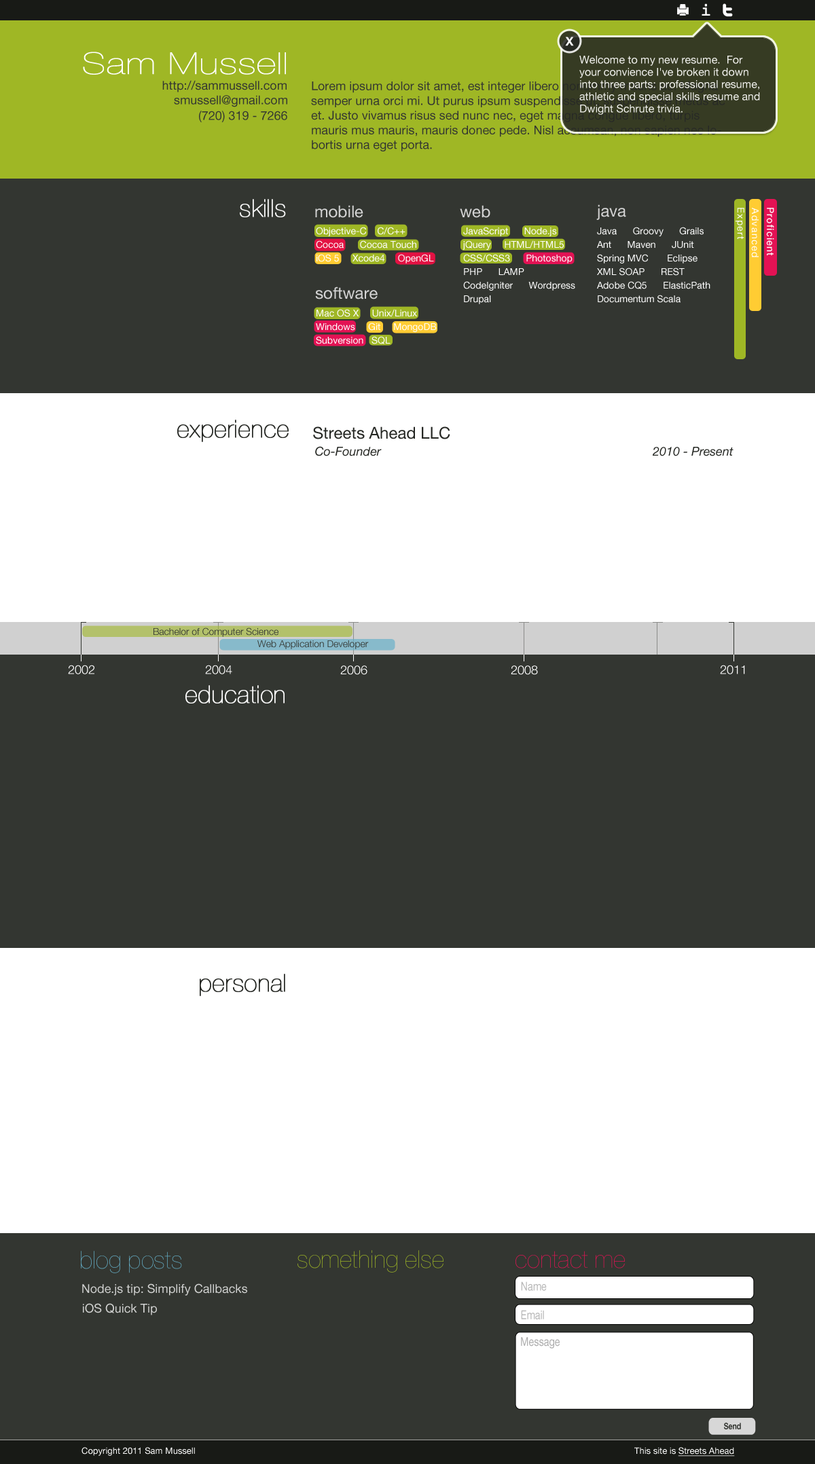
<style>
.page{position:relative;width:815px;height:1464px;background:#333631}
.page>*{position:absolute;margin:0}
.t1{font:17px "Courier";color:#ffffff;font-weight:bold}
.t2{font:12.2px "HelveticaNeue-Bold";color:#ffffff}
.t3{font:29.9px "HelveticaNeue-UltraLight";color:#ffffff;font-weight:bold;scale:1.28 1}
.t4{font:10.9px/12.2px "HelveticaNeue";color:#f3f3f0}
.t5{font:12.2px "HelveticaNeue";color:#333631}
.t6{font:24.4px "HelveticaNeue-UltraLight";color:#ffffff;font-weight:bold}
.t7{font:16.3px "HelveticaNeue";color:#d4d4d4}
.t8{font:9.5px "HelveticaNeue";letter-spacing:0.1em;color:#ffffff}
.t9{font:9.5px/13.6px "HelveticaNeue";color:#ffffff}
.t10{font:24.4px "HelveticaNeue-UltraLight";color:#252723;font-weight:bold}
.t11{font:16.3px "HelveticaNeue";color:#252723}
.t12{font:12.2px "HelveticaNeue-Italic";color:#252723}
.t13{font:9.5px "HelveticaNeue-Light";color:#333631}
.t14{font:12.2px "HelveticaNeue-Light";color:#ffffff}
.t15{font:24.4px "HelveticaNeue-UltraLight";color:#65b0c8}
.t16{font:24.4px "HelveticaNeue-UltraLight";color:#9fb725}
.t17{font:24.4px "HelveticaNeue-UltraLight";color:#e31254}
.t18{font:12.2px "HelveticaNeue";color:#d2d3d2}
.t19{font:12.2px "HelveticaNeue";color:#b7b7b7;scale:0.8 1}
.t20{font:12.2px "HelveticaNeue";color:#acacac;scale:0.8 1}
.t21{font:8.9px "HelveticaNeue-Bold";color:#333631;scale:0.8 1}
.t22{font:8.8px "HelveticaNeue";color:#ffffff}
.t23{font:8.8px "HelveticaNeue";color:#ffffff;text-decoration:underline}
</style>
<div class="page">
<p class="t1" style="left:701px;top:3px;width:9px;height:13px">i</p>
<p class="t2" style="left:565px;top:37px;width:9px;height:9px">X</p>
<p class="t3" style="left:83px;top:52px;width:203px;height:23px">Sam Mussell</p>
<p class="t4" style="left:579px;top:56px;width:181px;height:59px">Welcome to my new resume.  For your convience I've broken it down into three parts: professional resume, athletic and special skills resume and Dwight Schrute trivia.</p>
<p class="t5" style="left:162px;top:80px;width:124px;height:12px">http://sammussell.com</p>
<p class="t5" style="left:311px;top:81px;width:414px;height:70px">Lorem ipsum dolor sit amet, est integer libero nonummy mauris ac. Magna semper urna orci mi. Ut purus ipsum suspendisse ut, suspendisse metus ac et. Justo vivamus risus sed nunc nec, eget magna congue libero, turpis mauris mus mauris, mauris donec pede. Nisl accumsan, non sapien nec lobortis urna eget porta.</p>
<p class="t5" style="left:174px;top:95px;width:113px;height:12px">smussell@gmail.com</p>
<p class="t5" style="left:199px;top:111px;width:88px;height:11px">(720) 319 - 7266</p>
<p class="t6" style="left:240px;top:199px;width:46px;height:18px">skills</p>
<p class="t7" style="left:315px;top:205px;width:48px;height:13px">mobile</p>
<p class="t7" style="left:460px;top:205px;width:30px;height:13px">web</p>
<p class="t7" style="left:596px;top:204px;width:30px;height:16px">java</p>
<p class="t8" style="left:735px;top:208px;width:9px;height:31px;rotate:90deg">Expert</p>
<p class="t8" style="left:751px;top:208px;width:7px;height:49px;rotate:90deg">Advanced</p>
<p class="t8" style="left:766px;top:208px;width:8px;height:48px;rotate:90deg">Proficient</p>
<p class="t9" style="left:316px;top:227px;width:118px;height:36px">Objective-C    C/C++    Cocoa      Cocoa Touch    iOS 5     Xcode4     OpenGL</p>
<p class="t9" style="left:462px;top:227px;width:113px;height:77px">JavaScript      Node.js      jQuery     HTML/HTML5 CSS/CSS3      Photoshop<br>PHP      LAMP     <br>CodeIgniter      Wordpress      Drupal</p>
<p class="t9" style="left:597px;top:227px;width:113px;height:76px">Java      Groovy      Grails<br>Ant      Maven      JUnit <br>Spring MVC       Eclipse      XML SOAP      REST      <br>Adobe CQ5      ElasticPath      Documentum Scala</p>
<p class="t7" style="left:315px;top:286px;width:62px;height:13px">software</p>
<p class="t9" style="left:316px;top:309px;width:121px;height:35px">Mac OS X     Unix/Linux <br>Windows     Git     MongoDB<br>Subversion   SQL</p>
<p class="t10" style="left:177px;top:420px;width:112px;height:22px">experience</p>
<p class="t11" style="left:313px;top:426px;width:137px;height:13px">Streets Ahead LLC</p>
<p class="t12" style="left:315px;top:446px;width:67px;height:10px">Co-Founder</p>
<p class="t12" style="left:652px;top:447px;width:81px;height:9px">2010 - Present</p>
<p class="t13" style="left:153px;top:627px;width:125px;height:10px">Bachelor of Computer Science</p>
<p class="t13" style="left:257px;top:640px;width:112px;height:9px">Web Application Developer</p>
<p class="t14" style="left:68px;top:665px;width:26px;height:9px">2002</p>
<p class="t14" style="left:205px;top:665px;width:27px;height:9px">2004</p>
<p class="t14" style="left:340px;top:665px;width:27px;height:10px">2006</p>
<p class="t14" style="left:511px;top:665px;width:27px;height:10px">2008</p>
<p class="t14" style="left:720px;top:665px;width:25px;height:9px">2011</p>
<p class="t6" style="left:185px;top:685px;width:99px;height:18px">education</p>
<p class="t10" style="left:200px;top:974px;width:85px;height:22px">personal</p>
<p class="t15" style="left:81px;top:1251px;width:101px;height:22px">blog posts</p>
<p class="t16" style="left:297px;top:1250px;width:146px;height:22px">something else</p>
<p class="t17" style="left:515px;top:1251px;width:110px;height:17px">contact me</p>
<p class="t18" style="left:82px;top:1283px;width:165px;height:12px">Node.js tip: Simplify Callbacks</p>
<p class="t19" style="left:521px;top:1281px;width:26px;height:10px">Name</p>
<p class="t18" style="left:83px;top:1303px;width:74px;height:12px">iOS Quick Tip</p>
<p class="t19" style="left:521px;top:1310px;width:23px;height:9px">Email</p>
<p class="t20" style="left:521px;top:1337px;width:38px;height:11px">Message</p>
<p class="t21" style="left:724px;top:1422px;width:17px;height:7px">Send</p>
<p class="t22" style="left:81px;top:1447px;width:114px;height:9px">Copyright 2011 Sam Mussell</p>
<p class="t23" style="left:634px;top:1447px;width:101px;height:9px"><span class="t22">This site is </span>Streets Ahead</p>
</div>
